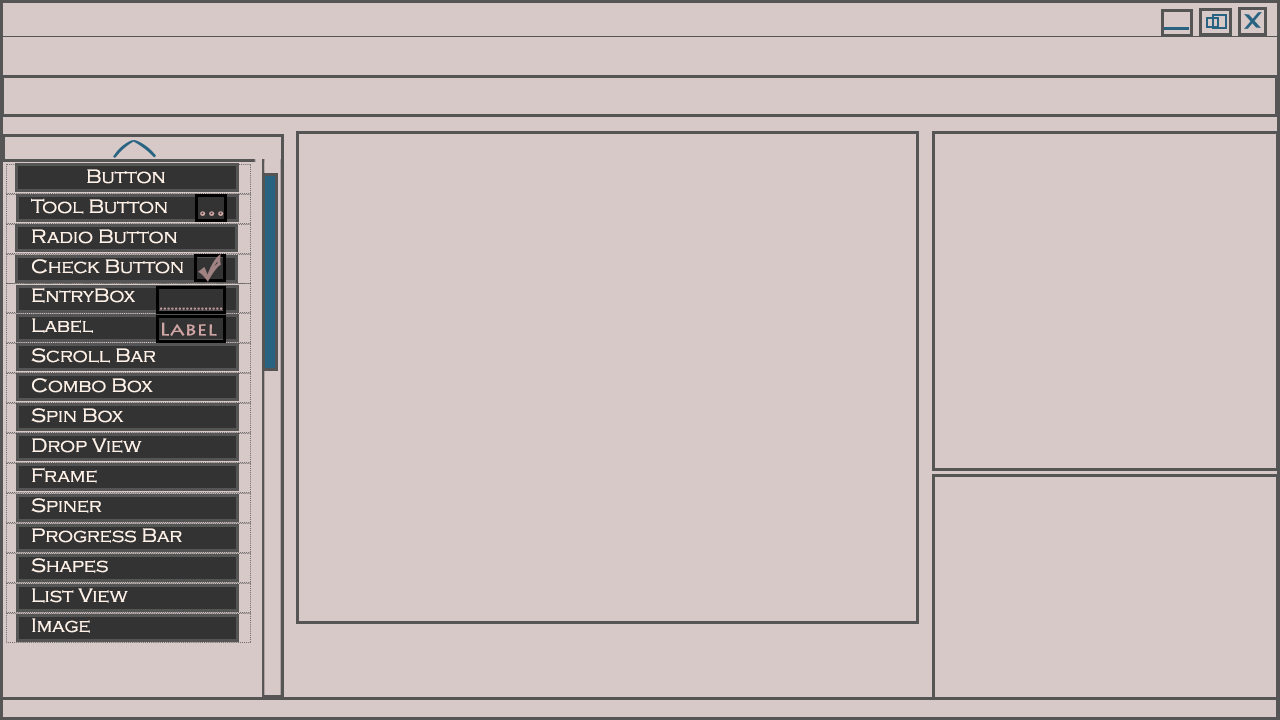
<style>
.page{position:relative;width:1280px;height:720px;background:#d8c9c9}
.page>*{position:absolute;margin:0}
.t1{font:20px "CopperplateGothic-Light";color:#fef1e8}
.t2{font:24px "Jokerman-Regular";color:#cfa5a5;scale:1.14 1}
.t3{font:10px "Jokerman-Regular";color:#cfa5a5;scale:1.14 1}
.t4{font:18px "LithosPro-Regular";color:#cfa5a5;scale:1.14 1}
</style>
<div class="page">
<p class="t1" style="left:87px;top:169px;width:78px;height:15px">Button</p>
<p class="t1" style="left:31px;top:198px;width:136px;height:16px">Tool Button</p>
<p class="t2" style="left:200px;top:211px;width:24px;height:5px">...</p>
<p class="t1" style="left:32px;top:229px;width:145px;height:15px">Radio Button</p>
<p class="t1" style="left:32px;top:259px;width:151px;height:15px">Check Button</p>
<p class="t1" style="left:32px;top:287px;width:103px;height:16px">EntryBox</p>
<p class="t1" style="left:32px;top:318px;width:61px;height:15px">Label</p>
<p class="t3" style="left:160px;top:307px;width:63px;height:3px">.................</p>
<p class="t4" style="left:162px;top:322px;width:55px;height:14px">Label</p>
<p class="t1" style="left:31px;top:348px;width:125px;height:15px">Scroll Bar</p>
<p class="t1" style="left:32px;top:378px;width:121px;height:15px">Combo Box</p>
<p class="t1" style="left:31px;top:408px;width:93px;height:15px">Spin Box</p>
<p class="t1" style="left:32px;top:438px;width:110px;height:15px">Drop View</p>
<p class="t1" style="left:32px;top:467px;width:65px;height:16px">Frame</p>
<p class="t1" style="left:31px;top:498px;width:71px;height:15px">Spiner</p>
<p class="t1" style="left:32px;top:528px;width:150px;height:15px">Progress Bar</p>
<p class="t1" style="left:31px;top:558px;width:77px;height:15px">Shapes</p>
<p class="t1" style="left:32px;top:588px;width:96px;height:15px">List View</p>
<p class="t1" style="left:32px;top:618px;width:58px;height:15px">Image</p>
</div>
